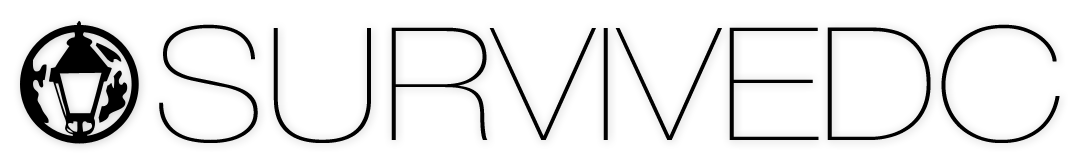
<style>
.page{position:relative;width:1080px;height:164px;background:#ffffff}
.page>*{position:absolute;margin:0}
.t1{font:157.2px "HelveticaNeue-UltraLight";letter-spacing:0.01em;color:#000000;scale:1.18 1}
</style>
<div class="page">
<p class="t1" style="left:159px;top:24px;width:901px;height:119px">SURVIVEDC</p>
</div>
